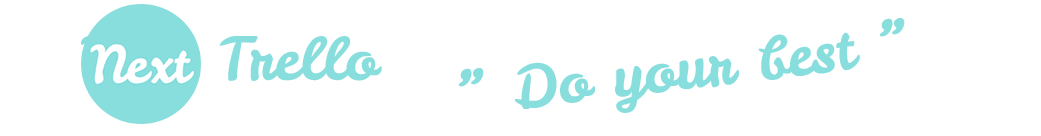
<style>
.page{position:relative;width:1041px;height:136px;background:#ffffff}
.page>*{position:absolute;margin:0}
.t1{font:59px "LeckerliOne-Regular";color:#88dddd}
</style>
<div class="page">
<p class="t1" style="left:459px;top:18px;width:446px;height:95px;rotate:-7deg">“ Do your best “</p>
<p class="t1" style="left:81px;top:35px;width:301px;height:46px">Next Trello</p>
</div>
